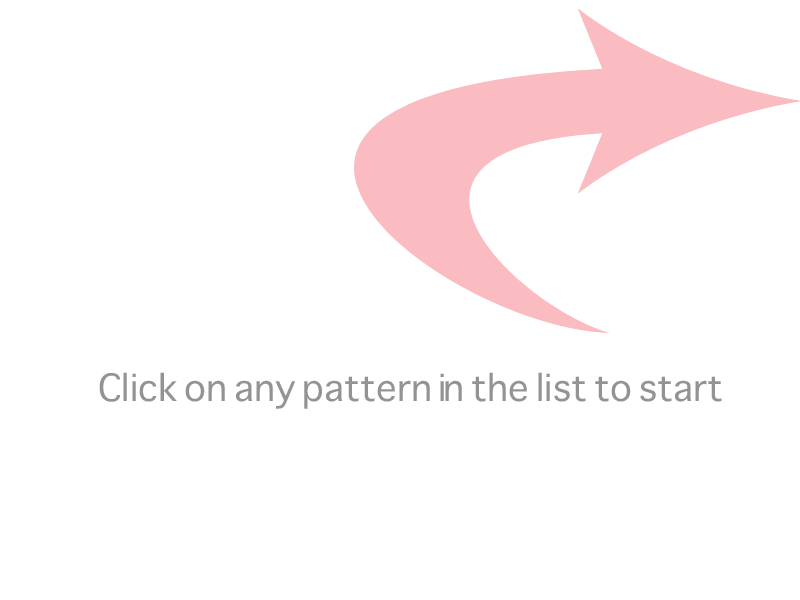
<style>
.page{position:relative;width:800px;height:600px;background:#ffffff}
.page>*{position:absolute;margin:0}
.t1{font:36px "Sathu";color:#949292}
</style>
<div class="page">
<p class="t1" style="left:99px;top:372px;width:623px;height:37px">Click on any pattern in the list to start</p>
</div>
